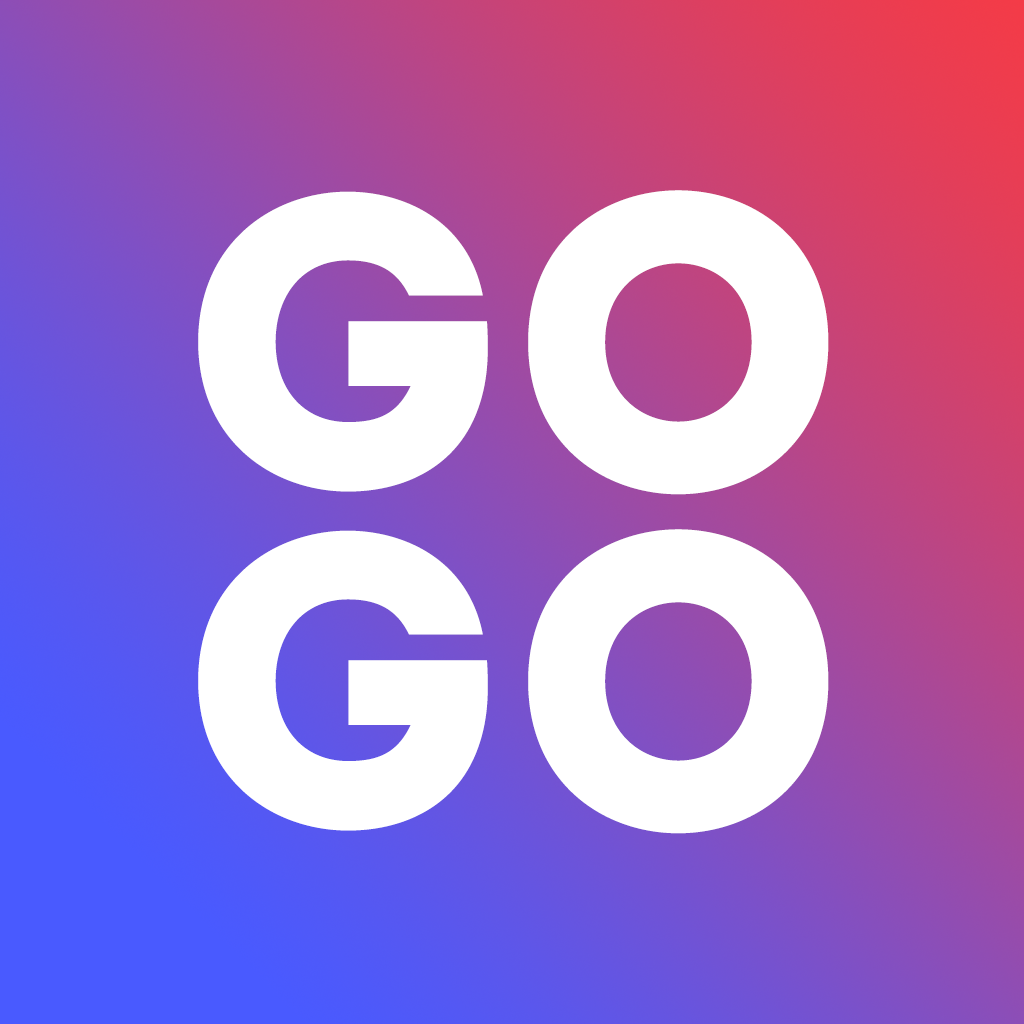
<style>
.page{position:relative;width:1024px;height:1024px;background:#ffffff}
.page>*{position:absolute;margin:0}
.t1{font:417.9px/339.8px "Intro";color:#ffffff}
</style>
<div class="page">
<p class="t1" style="left:198px;top:190px;width:631px;height:644px">GO<br>GO</p>
</div>
